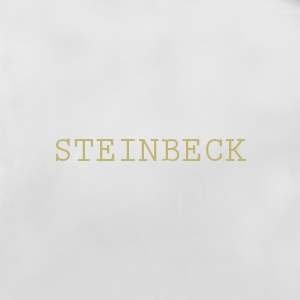
<style>
.page{position:relative;width:300px;height:300px}
.page>*{position:absolute;margin:0}
.t1{font:36px "PrestigeEliteStd-Bd";color:#c1b774}
</style>
<div class="page">
<p class="t1" style="left:55px;top:138px;width:192px;height:23px">STEINBECK</p>
</div>
